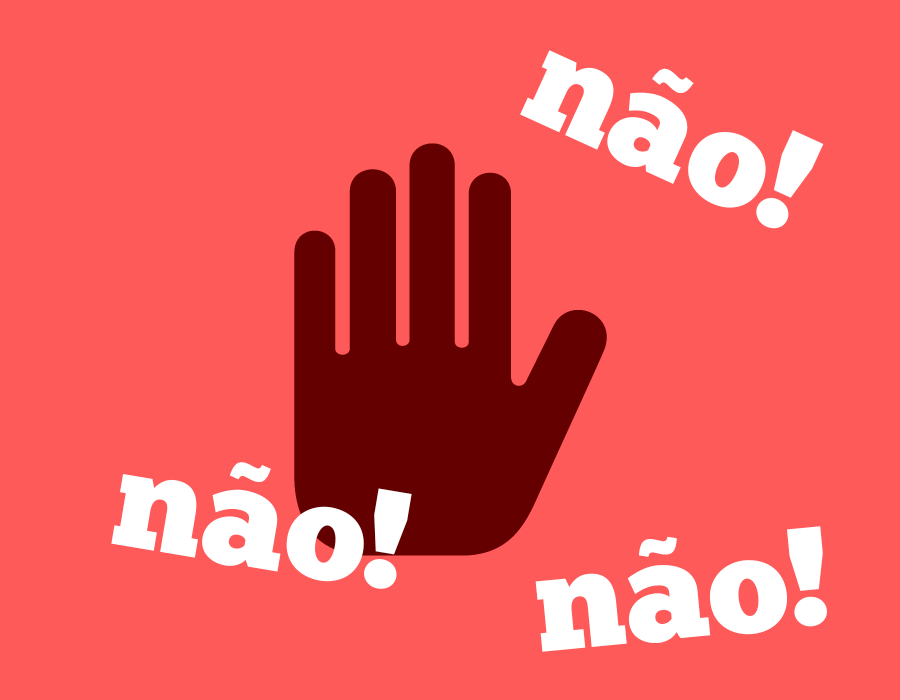
<style>
.page{position:relative;width:900px;height:700px;background:#ff5a5a}
.page>*{position:absolute;margin:0}
.t1{font:141px "ChunkFive-Roman";color:#ffffff}
.t2{font:92.7px "GothamUltra";color:#ffffff}
</style>
<div class="page">
<p class="t1" style="left:520px;top:50px;width:304px;height:179px;rotate:25deg">nao!</p>
<p class="t2" style="left:652px;top:68px;width:42px;height:26px;rotate:25deg">~</p>
<p class="t2" style="left:229px;top:462px;width:42px;height:20px;rotate:10deg">~</p>
<p class="t1" style="left:111px;top:474px;width:301px;height:115px;rotate:10deg">nao!</p>
<p class="t1" style="left:535px;top:526px;width:292px;height:126px;rotate:-5deg">nao!</p>
<p class="t2" style="left:639px;top:536px;width:38px;height:21px;rotate:-5deg">~</p>
</div>
